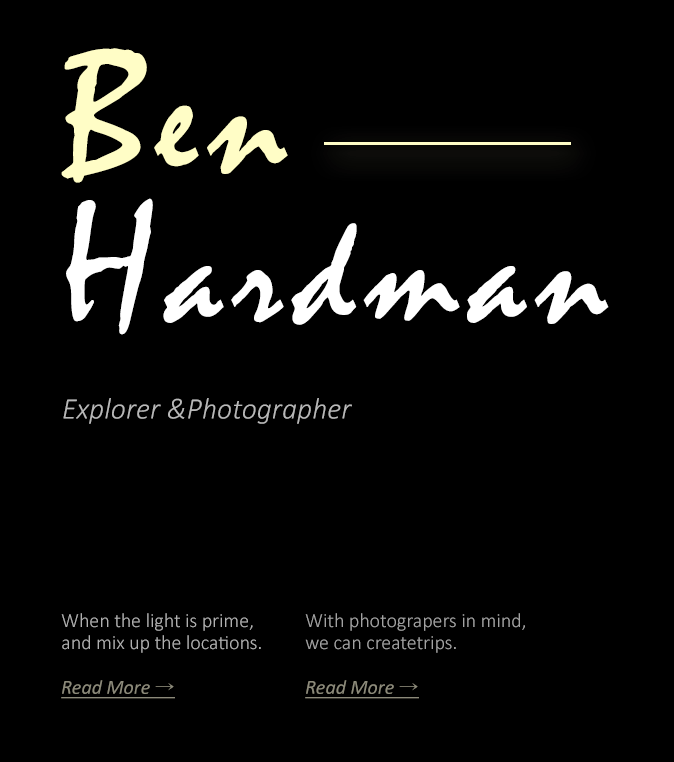
<style>
.page{position:relative;width:674px;height:762px;background:#000000}
.page>*{position:absolute;margin:0}
.t1{font:30px/72px "Calibri-LightItalic";color:#b8b8b8}
.t2{font:180px/150px "Mistral";letter-spacing:0.05em;color:#fffdc6;font-weight:bold}
.t3{font:164.4px/150px "Mistral";letter-spacing:0.05em;color:#fffdc6;font-weight:bold}
.t4{font:180px/150px "Mistral";letter-spacing:0.05em;color:#ffffff;font-weight:bold}
.t5{font:150px/150px "Mistral";letter-spacing:0.05em;color:#ffffff;font-weight:bold}
.t6{font:20px/22px "Calibri-Light"}
.t7{font:20px/22px "Calibri-Italic";text-decoration:underline}
.t8{font:20px/22px "Gulim";text-decoration:underline}
</style>
<div class="page">
<p class="t1" style="left:61px;top:48px;width:548px;height:376px"><span class="t2">B</span><span class="t3">en <br></span><span class="t4">H</span><span class="t5">ardman<br><br></span>Explorer &amp;Photographer</p>
<p class="t6" style="left:61px;top:613px;width:200px;height:86px">When the light is prime, <br>and mix up the locations.<br><br><span class="t7">Read More </span><span class="t8">→</span></p>
<p class="t6" style="left:305px;top:613px;width:220px;height:86px">With photograpers in mind, <br>we can createtrips.<br><br><span class="t7">Read More </span><span class="t8">→</span></p>
</div>
